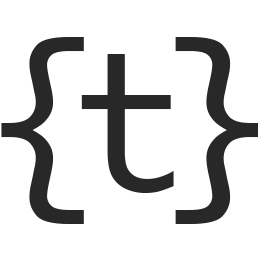
<style>
.page{position:relative;width:260px;height:260px;background:#ffffff}
.page>*{position:absolute;margin:0}
.t1{font:189.6px "Monaco";letter-spacing:-0.12em;color:#282828}
</style>
<div class="page">
<p class="t1" style="left:1px;top:37px;width:257px;height:187px">{t}</p>
</div>
